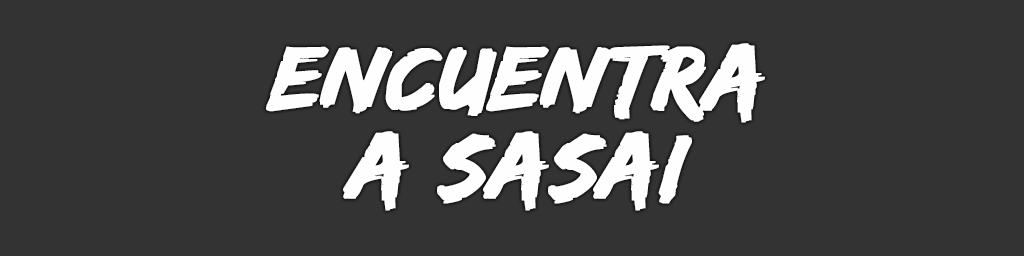
<style>
.page{position:relative;width:1024px;height:256px;background:#333333}
.page>*{position:absolute;margin:0}
.t1{font:94px/88px "EdoSZ";color:#fefefe;font-weight:bold;font-style:italic;scale:1.04 1}
</style>
<div class="page">
<p class="t1" style="left:266px;top:43px;width:499px;height:168px;text-align:center">encuentra<br>a sasai</p>
</div>
